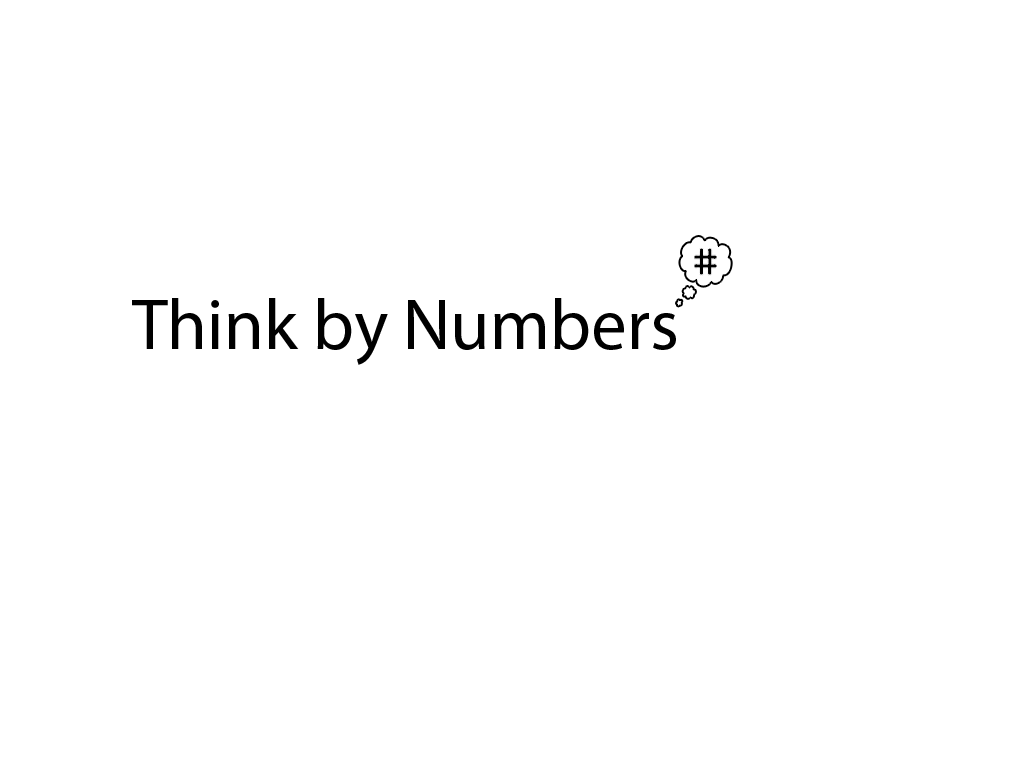
<style>
.page{position:relative;width:1024px;height:768px;background:#ffffff}
.page>*{position:absolute;margin:0}
.t1{font:72px "MyriadPro-Regular";color:#000000}
</style>
<div class="page">
<p class="t1" style="left:132px;top:298px;width:544px;height:67px">Think by Numbers</p>
</div>
